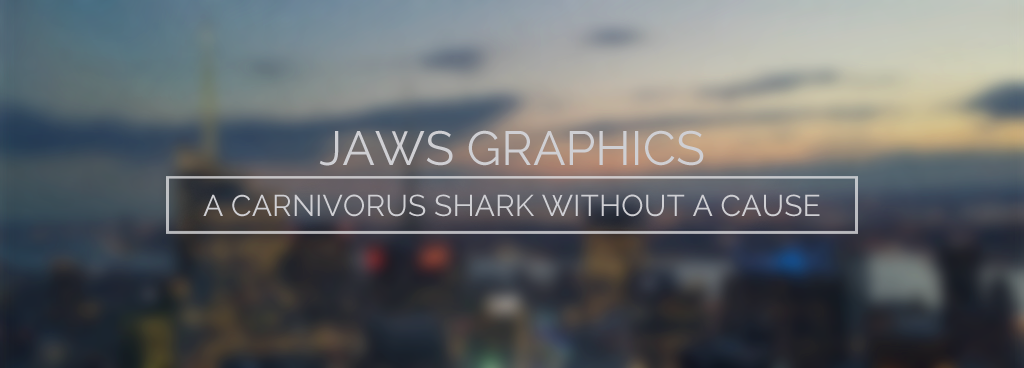
<style>
.page{position:relative;width:1024px;height:368px}
.page>*{position:absolute;margin:0}
.t1{font:48px "Raleway-Regular";color:#e7e7e9}
.t2{font:125px "BebasNeue";color:#e7e7e9}
.t3{font:30px "Raleway-Regular";color:#e7e7e9}
</style>
<div class="page">
<p class="t1" style="left:319px;top:130px;width:385px;height:36px"><span class="t2"><br></span>JAWS GRAPHICS</p>
<p class="t3" style="left:203px;top:194px;width:617px;height:23px">A CARNIVORUS SHARK WITHOUT A CAUSE</p>
</div>
